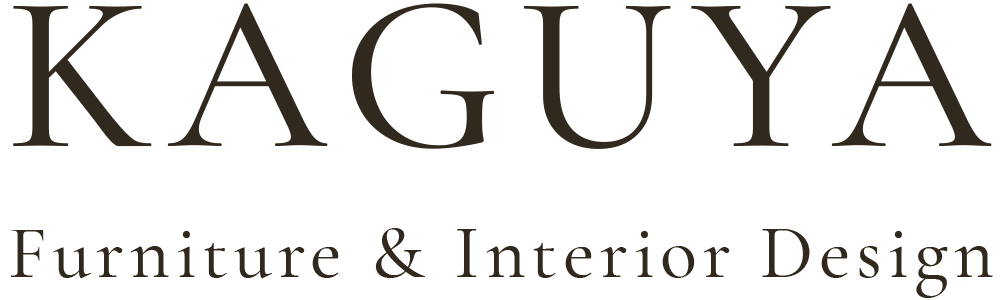
<style>
.page{position:relative;width:1000px;height:300px;background:#ffffff}
.page>*{position:absolute;margin:0}
.t1{font:224.1px "CormorantGaramond-Medium";letter-spacing:0.075em;color:#31281e}
.t2{font:76.5px "CormorantGaramond-Medium";letter-spacing:0.075em;color:#31281e}
</style>
<div class="page">
<p class="t1" style="left:13px;top:3px;width:979px;height:146px">KAGUYA</p>
<p class="t2" style="left:10px;top:228px;width:983px;height:70px">Furniture &amp; Interior Design</p>
</div>
